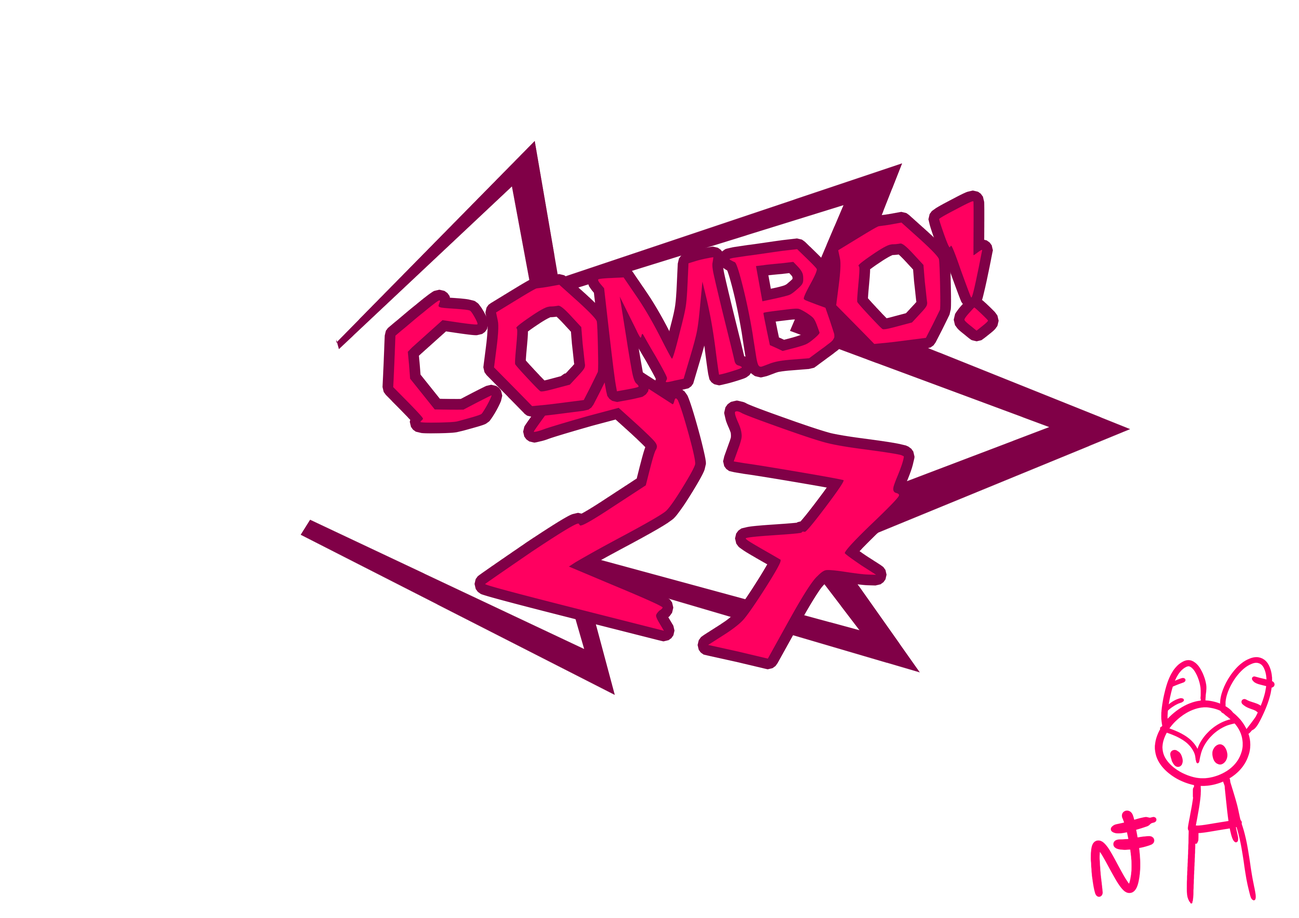
<style>
.page{position:relative;width:1299px;height:918px;background:#ffffff}
.page>*{position:absolute;margin:0}
.t1{font:231.4px "BasebrawlMain-Regular";color:#ff0060}
.t2{font:462.8px "BasebrawlMain-Regular";color:#ff0060}
</style>
<div class="page">
<p class="t1" style="left:393px;top:201px;width:595px;height:222px;rotate:-10deg">COMBO!</p>
<p class="t2" style="left:485px;top:376px;width:419px;height:283px;rotate:14deg">27</p>
</div>
